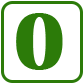
<style>
.page{position:relative;width:84px;height:84px;background:#ffffff}
.page>*{position:absolute;margin:0}
.t1{font:83.3px "BritannicBold";color:#2c7b09}
</style>
<div class="page">
<p class="t1" style="left:16px;top:13px;width:47px;height:57px">0</p>
</div>
